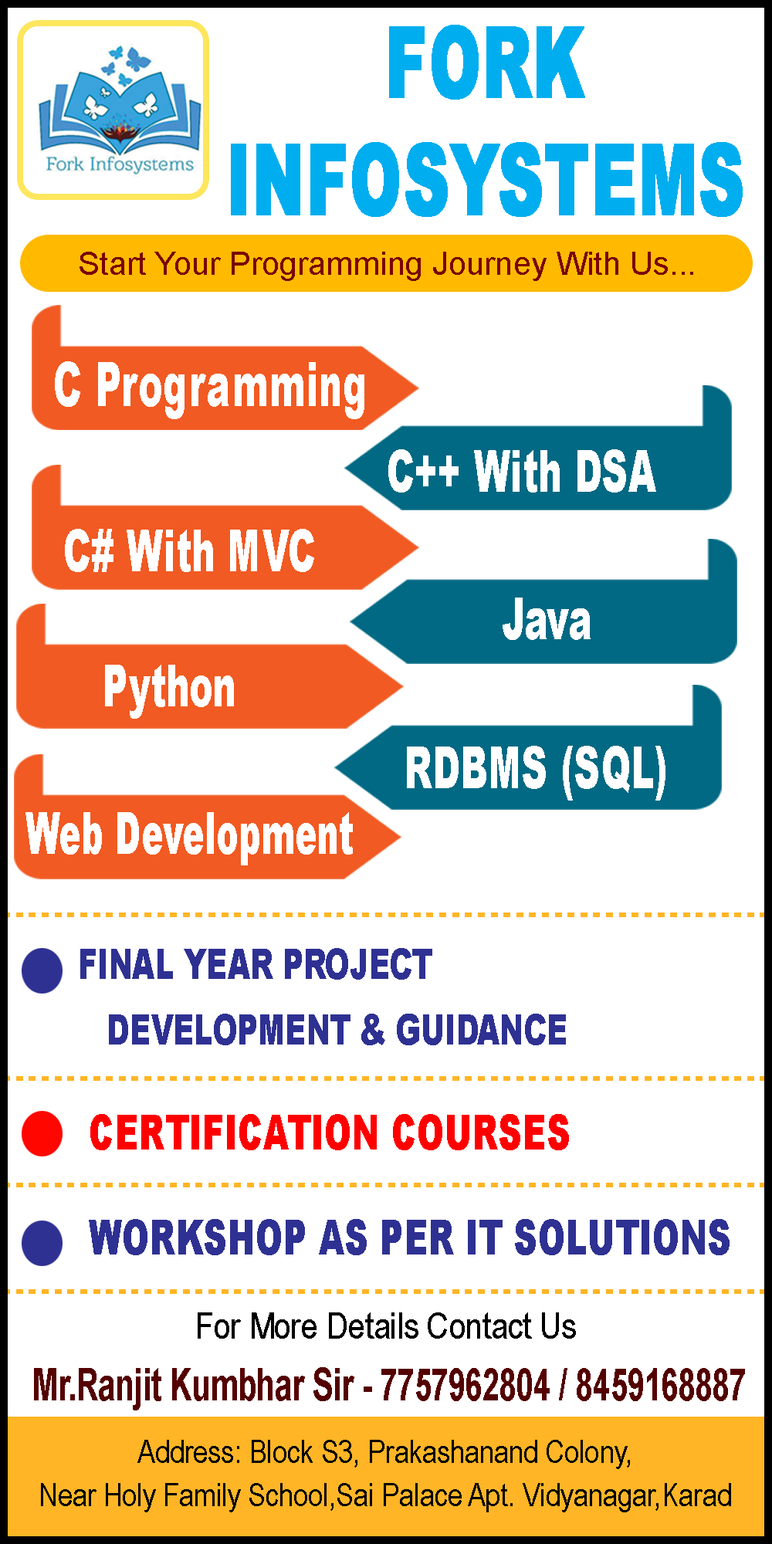
<style>
.page{position:relative;width:772px;height:1544px;background:#ffffff}
.page>*{position:absolute;margin:0}
.t1{font:97.7px/117.2px "Arial-Black";color:#00aeef;text-transform:uppercase;font-weight:bold;scale:0.64 1}
.t2{font:32.3px "ArialMT";color:#7a0202}
.t3{font:61px "Arial-Black";color:#ffffff;scale:0.6 1}
.t4{font:61px "Arial-Black";color:#ffffff;text-transform:uppercase;scale:0.6 1}
.t5{font:59px "Arial-Black";color:#ffffff;scale:0.6 1}
.t6{font:59px "Arial-Black";color:#ffffff;text-transform:uppercase;scale:0.6 1}
.t7{font:59px "Arial-Black";color:#ffffff;font-variant:small-caps;scale:0.6 1}
.t8{font:59px "Arial-Black";color:#ffffff;scale:0.57 1}
.t9{font:48.3px/105px "Arial-Black";color:#2e3192;text-transform:uppercase;scale:0.69 1}
.t10{font:41.9px/131.3px "Arial-Black";color:#2e3192;text-transform:uppercase;scale:0.69 1}
.t11{font:41.9px/39.4px "Arial-Black";color:#2e3192;text-transform:uppercase;scale:0.69 1}
.t12{font:48.3px/105px "Arial-Black";color:#ff0000;text-transform:uppercase;scale:0.69 1}
.t13{font:36.9px "ArialNarrow";color:#000000}
.t14{font:45.2px "Arial-BoldMT";color:#540000;scale:0.68 1}
.t15{font:32.2px/42.9px "ArialNarrow";color:#000000}
</style>
<div class="page">
<p class="t1" style="left:231px;top:25px;width:512px;height:192px;text-align:center">Fork <br>Infosystems</p>
<p class="t2" style="left:80px;top:252px;width:613px;height:29px">Start Your Programming Journey With Us...</p>
<p class="t3" style="left:55px;top:361px;width:309px;height:58px"><span class="t4">  C </span>Programming</p>
<p class="t5" style="left:388px;top:449px;width:268px;height:44px"><span class="t6"> C++ </span>With DSA</p>
<p class="t5" style="left:65px;top:529px;width:249px;height:43px">C# With MVC</p>
<p class="t5" style="left:503px;top:598px;width:88px;height:42px">Java</p>
<p class="t5" style="left:105px;top:665px;width:129px;height:54px">Python</p>
<p class="t7" style="left:407px;top:746px;width:259px;height:55px">RDBMS (SQL)</p>
<p class="t8" style="left:25px;top:812px;width:328px;height:54px">Web Development</p>
<p class="t9" style="left:80px;top:948px;width:650px;height:308px"><span class="t10">Final Year Project <br></span><span class="t11">   Development &amp; Guidance  <br></span><span class="t12"> Certification Courses          <br> </span>Workshop As Per IT Solutions</p>
<p class="t13" style="left:198px;top:1313px;width:378px;height:26px">For More Details Contact Us</p>
<p class="t14" style="left:34px;top:1367px;width:711px;height:44px">Mr.Ranjit Kumbhar Sir - 7757962804 / 8459168887</p>
<p class="t15" style="left:41px;top:1440px;width:690px;height:73px;text-align:center">Address: Block S3, Prakashanand Colony,<br>Near Holy Family School,Sai Palace Apt. Vidyanagar,Karad</p>
</div>
